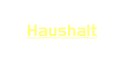
<style>
.page{position:relative;width:123px;height:60px;background:#ffffff}
.page>*{position:absolute;margin:0}
.t1{font:16px "AeroRegularSWFTE";color:#fffe7e;text-decoration:underline}
</style>
<div class="page">
<p class="t1" style="left:26px;top:24px;width:72px;height:15px">Haushalt</p>
</div>
